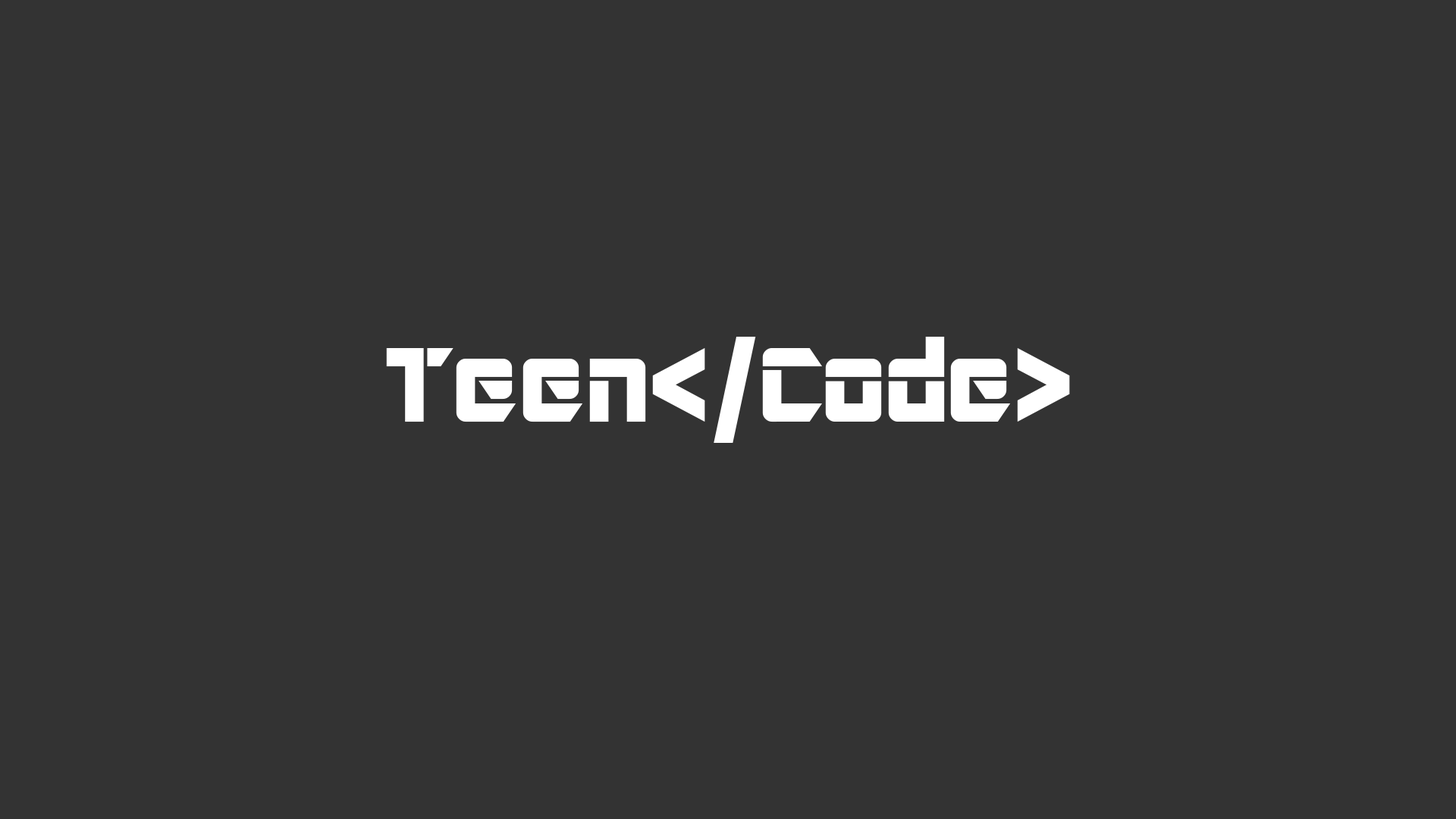
<style>
.page{position:relative;width:1456px;height:819px;background:#333333}
.page>*{position:absolute;margin:0}
.t1{font:117.4px "ARDESTINE";color:#ffffff}
</style>
<div class="page">
<p class="t1" style="left:386px;top:337px;width:684px;height:106px">Teen&lt;/Code&gt;</p>
</div>
